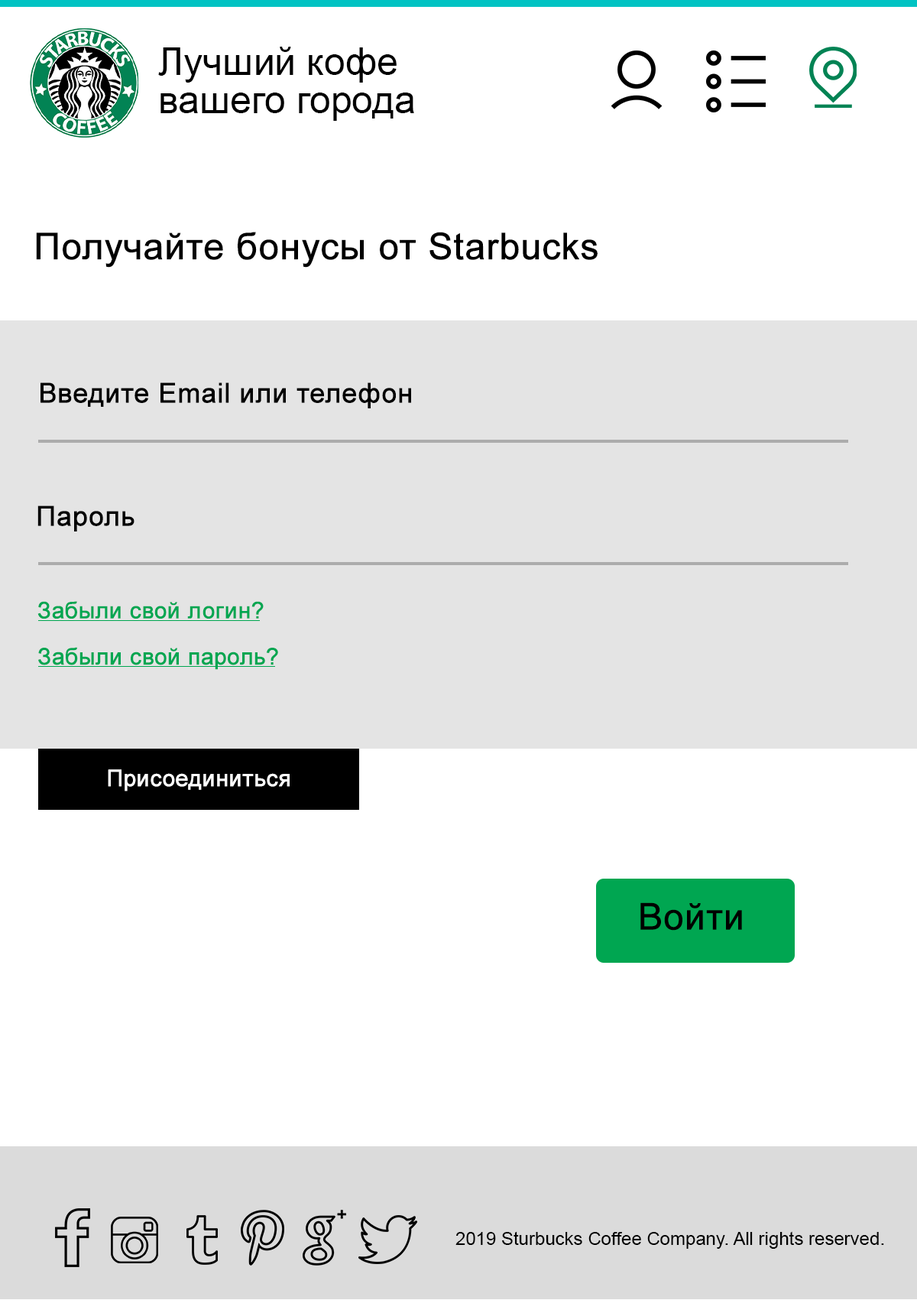
<style>
.page{position:relative;width:917px;height:1300px;background:#ffffff}
.page>*{position:absolute;margin:0}
.t1{font:38.2px/38.2px "ArialMT";color:#000000}
.t2{font:36.7px "ArialMT";color:#000000;font-weight:bold}
.t3{font:27.5px "ArialMT";color:#000000;font-weight:bold}
.t4{font:22.9px "ArialMT";color:#00a651;font-weight:bold}
.t5{font:22.9px "ArialMT";color:#ffffff;font-weight:bold}
.t6{font:18.3px "ArialMT";color:#000000}
</style>
<div class="page">
<p class="t1" style="left:158px;top:47px;width:256px;height:74px">Лучший кофе<br>вашего города</p>
<p class="t2" style="left:36px;top:232px;width:562px;height:36px">Получайте бонусы от Starbucks</p>
<p class="t3" style="left:41px;top:382px;width:370px;height:26px">Введите Email или телефон</p>
<p class="t3" style="left:37px;top:505px;width:98px;height:26px">Пароль</p>
<p class="t4" style="left:37px;top:601px;width:227px;height:18px">Забыли свой логин?</p>
<p class="t4" style="left:38px;top:647px;width:240px;height:23px">Забыли свой пароль?</p>
<p class="t5" style="left:108px;top:769px;width:182px;height:22px">Присоединиться</p>
<p class="t2" style="left:641px;top:902px;width:101px;height:28px">Войти</p>
<p class="t6" style="left:456px;top:1231px;width:429px;height:17px">2019 Sturbucks Coffee Company. All rights reserved.</p>
</div>
